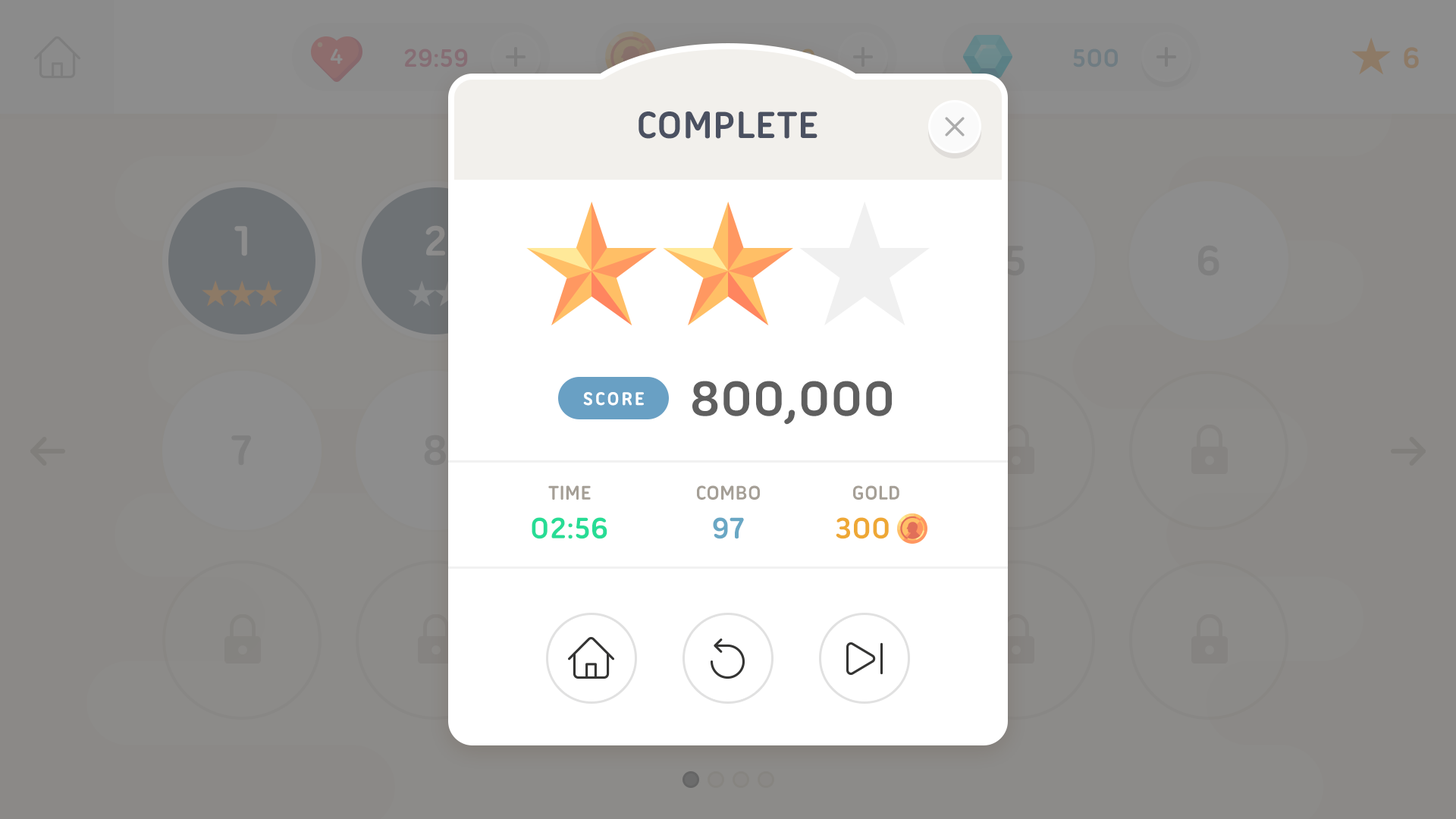
<style>
.page{position:relative;width:1456px;height:819px;background:#ffffff}
.page>*{position:absolute;margin:0}
.t1{font:40.9px "UbuntuTitling-Bold";color:#4b5161;text-transform:uppercase}
.t2{font:53.1px "UbuntuTitling-Bold";color:#5f5f5f;text-transform:uppercase}
.t3{font:19.7px "UbuntuTitling-Bold";letter-spacing:0.1em;color:#ffffff;text-transform:uppercase}
.t4{font:21.2px "UbuntuTitling-Bold";color:#a59f96;text-transform:uppercase}
.t5{font:31.8px "UbuntuTitling-Bold";color:#27dc95;text-transform:uppercase}
.t6{font:31.8px "UbuntuTitling-Bold";color:#69a7c4;text-transform:uppercase}
.t7{font:31.8px "UbuntuTitling-Bold";color:#eea835;text-transform:uppercase}
</style>
<div class="page">
<p class="t1" style="left:639px;top:111px;width:178px;height:28px">complete</p>
<p class="t2" style="left:692px;top:381px;width:200px;height:44px">800,000</p>
<p class="t3" style="left:583px;top:392px;width:61px;height:14px">score</p>
<p class="t4" style="left:548px;top:485px;width:43px;height:15px">Time</p>
<p class="t4" style="left:697px;top:485px;width:63px;height:15px">combo</p>
<p class="t4" style="left:853px;top:485px;width:46px;height:15px">gold</p>
<p class="t5" style="left:532px;top:517px;width:75px;height:22px">02:56</p>
<p class="t6" style="left:713px;top:517px;width:31px;height:22px">97</p>
<p class="t7" style="left:836px;top:517px;width:53px;height:22px">300</p>
</div>
